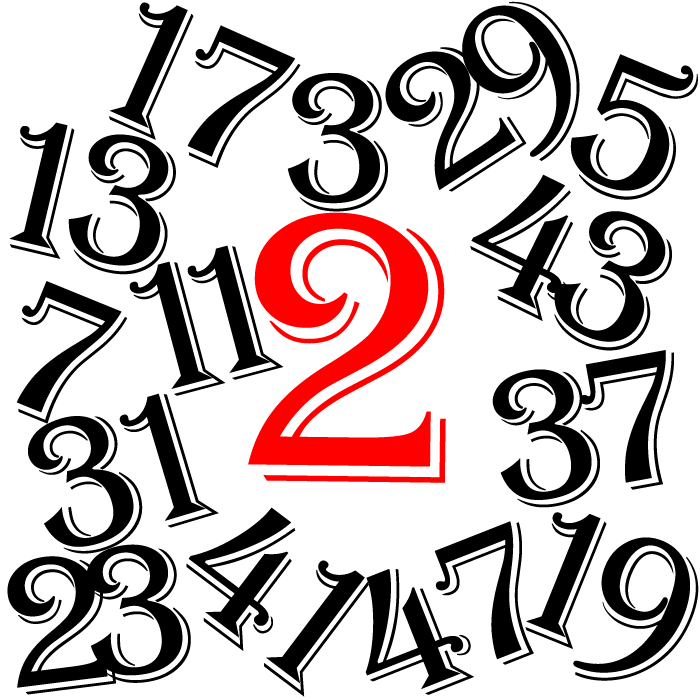
<style>
.page{position:relative;width:700px;height:700px;background:#ffffff}
.page>*{position:absolute;margin:0}
.t1{font:200px "Algerian";letter-spacing:-0.2em;color:#000000}
.t2{font:200px "Algerian";letter-spacing:-0.15em;color:#000000}
.t3{font:200px "Algerian";color:#000000}
.t4{font:400px "Algerian";color:#ff0000}
.t5{font:200px "Algerian";letter-spacing:-0.3em;color:#000000}
</style>
<div class="page">
<p class="t1" style="left:109px;top:2px;width:192px;height:166px;rotate:24deg">17</p>
<p class="t2" style="left:385px;top:1px;width:195px;height:191px;rotate:-33deg">29</p>
<p class="t3" style="left:570px;top:54px;width:128px;height:146px;rotate:23deg">5</p>
<p class="t3" style="left:287px;top:73px;width:101px;height:139px">3</p>
<p class="t1" style="left:9px;top:122px;width:167px;height:153px;rotate:13deg">13</p>
<p class="t2" style="left:470px;top:174px;width:202px;height:177px;rotate:26deg">43</p>
<p class="t4" style="left:248px;top:212px;width:198px;height:271px;rotate:1deg">2</p>
<p class="t5" style="left:129px;top:245px;width:155px;height:151px;rotate:-15deg">11</p>
<p class="t3" style="left:16px;top:281px;width:112px;height:143px;rotate:22deg">7</p>
<p class="t2" style="left:492px;top:350px;width:182px;height:158px;rotate:-10deg">37</p>
<p class="t2" style="left:28px;top:393px;width:191px;height:161px;rotate:-17deg">31</p>
<p class="t2" style="left:186px;top:507px;width:183px;height:190px;rotate:37deg">41</p>
<p class="t2" style="left:365px;top:521px;width:169px;height:174px;rotate:-21deg">47</p>
<p class="t1" style="left:525px;top:512px;width:174px;height:169px;rotate:22deg">19</p>
<p class="t1" style="left:7px;top:544px;width:184px;height:151px;rotate:-7deg">23</p>
</div>
